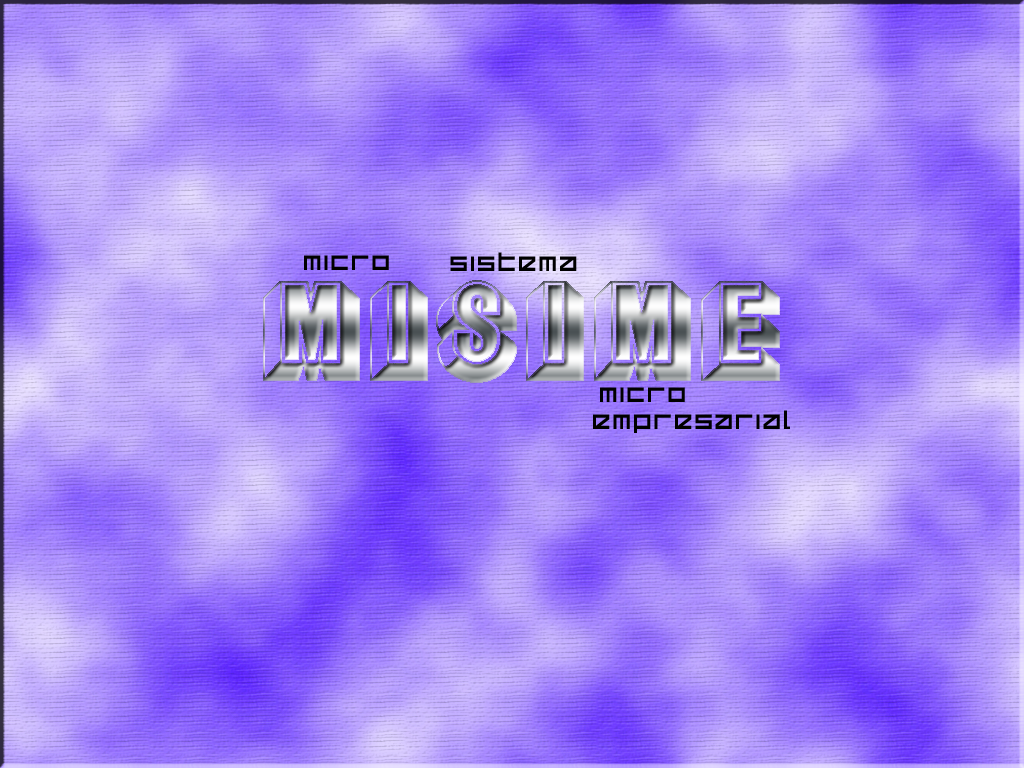
<style>
.page{position:relative;width:1024px;height:768px}
.page>*{position:absolute;margin:0}
.t1{font:30px "Delta-Ray";color:#000000}
</style>
<div class="page">
<p class="t1" style="left:304px;top:255px;width:85px;height:15px">Micro</p>
<p class="t1" style="left:450px;top:252px;width:127px;height:19px">Sistema</p>
<p class="t1" style="left:600px;top:387px;width:85px;height:15px">Micro</p>
<p class="t1" style="left:593px;top:410px;width:197px;height:23px">Empresarial</p>
</div>
